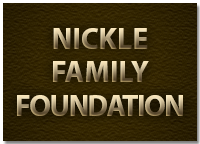
<style>
.page{position:relative;width:200px;height:144px}
.page>*{position:absolute;margin:0}
.t1{font:30px "MyriadPro-Bold"}
.t2{font:30px "MyriadPro-Bold";letter-spacing:-0.05em}
</style>
<div class="page">
<p class="t1" style="left:53px;top:28px;width:95px;height:21px">NICKLE</p>
<p class="t1" style="left:53px;top:61px;width:96px;height:21px">FAMILY</p>
<p class="t2" style="left:17px;top:95px;width:166px;height:21px">FOUNDATION</p>
</div>
